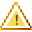
<style>
.page{position:relative;width:32px;height:32px;background:#ffffff}
.page>*{position:absolute;margin:0}
.t1{font:14px "ArialRoundedMTBold";color:#794507}
</style>
<div class="page">
<p class="t1" style="left:15px;top:14px;width:3px;height:11px">!</p>
</div>
